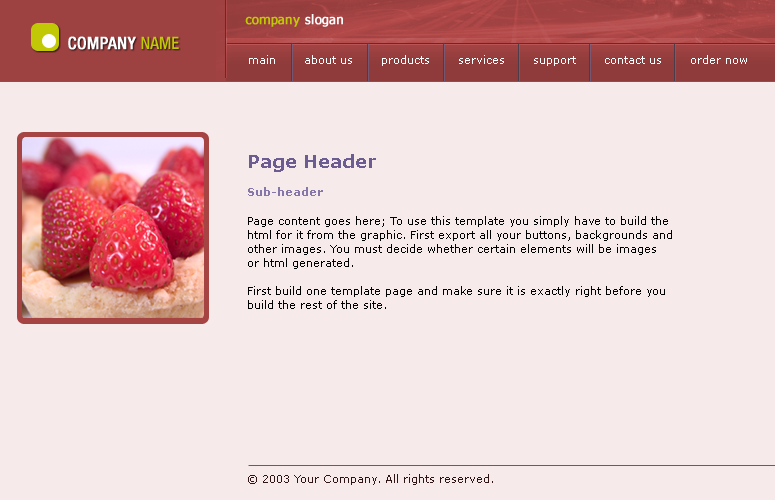
<style>
.page{position:relative;width:775px;height:500px;background:#f6eaea}
.page>*{position:absolute;margin:0}
.t1{font:11px "Verdana";color:#ffffff}
.t2{font:18px "Verdana-Bold";color:#6b5c91}
.t3{font:11px "Verdana-Bold";color:#8577a9}
.t4{font:11px/14px "Verdana";color:#000000}
</style>
<div class="page">
<p class="t1" style="left:249px;top:55px;width:498px;height:11px">main       about us       products       services       support       contact us       order now</p>
<p class="t2" style="left:249px;top:154px;width:127px;height:18px">Page Header</p>
<p class="t3" style="left:248px;top:187px;width:75px;height:9px">Sub-header</p>
<p class="t4" style="left:248px;top:216px;width:424px;height:93px">Page content goes here; To use this template you simply have to build the<br>html for it from the graphic. First export all your buttons, backgrounds and<br>other images. You must decide whether certain elements will be images<br>or html generated.<br><br>First build one template page and make sure it is exactly right before you<br>build the rest of the site.</p>
</div>
